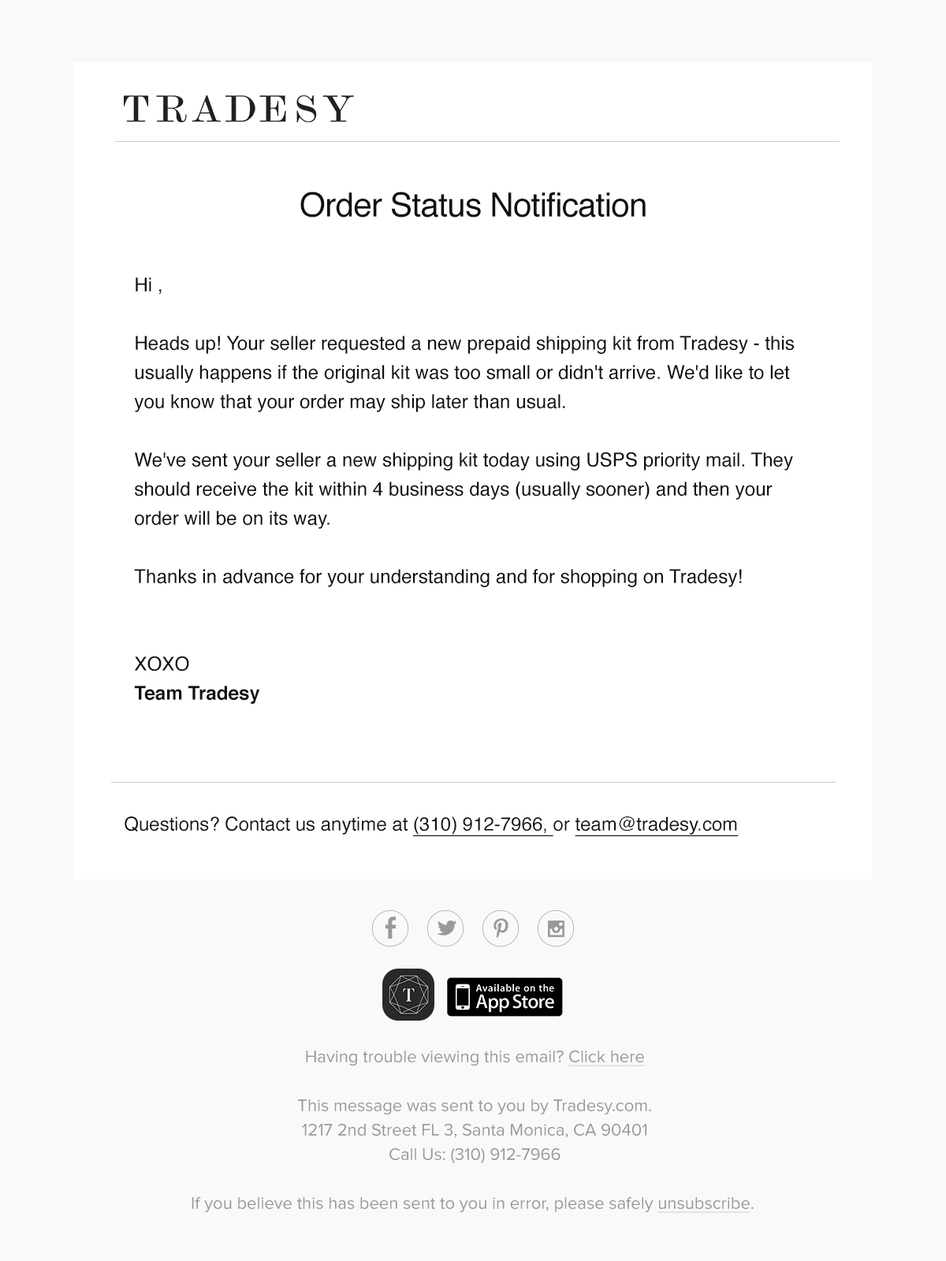
<style>
.page{position:relative;width:946px;height:1261px;background:#ffffff}
.page>*{position:absolute;margin:0}
.t1{font:33.4px "Helvetica";letter-spacing:-0.02em;color:#111111}
.t2{font:19.1px/29.2px "Helvetica";color:#111111}
.t3{font:19.1px/29.2px "Helvetica-Bold";color:#111111}
.t4{font:18.9px "Helvetica";color:#111111}
.t5{font:18.9px "Helvetica";color:#111111;text-decoration:underline}
.t6{font:17.3px/24.4px "ProximaNova-Regular";color:#999999}
.t7{font:17.3px/24.4px "ProximaNova-Regular";color:#999999;text-decoration:underline}
</style>
<div class="page">
<p class="t1" style="left:300px;top:192px;width:345px;height:26px">Order Status Notification</p>
<p class="t2" style="left:134px;top:277px;width:660px;height:427px">Hi ,<br><br>Heads up! Your seller requested a new prepaid shipping kit from Tradesy - this usually happens if the original kit was too small or didn't arrive. We'd like to let you know that your order may ship later than usual.<br><br>We've sent your seller a new shipping kit today using USPS priority mail. They should receive the kit within 4 business days (usually sooner) and then your order will be on its way.<br><br>Thanks in advance for your understanding and for shopping on Tradesy!<br><br><br>XOXO<br><span class="t3">Team Tradesy</span></p>
<p class="t4" style="left:125px;top:816px;width:613px;height:20px">Questions? Contact us anytime at <span class="t5">(310) 912-7966, </span>or <span class="t5">team@tradesy.com</span></p>
<p class="t6" style="left:192px;top:1050px;width:561px;height:163px;text-align:center">Having trouble viewing this email? <span class="t7">Click here<br></span><br>This message was sent to you by Tradesy.com.<br>1217 2nd Street FL 3, Santa Monica, CA 90401<br>Call Us: (310) 912-7966<br><br>If you believe this has been sent to you in error, please safely <span class="t7">unsubscribe</span>.</p>
</div>
